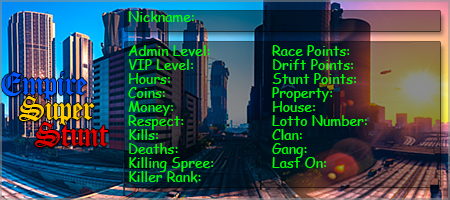
<style>
.page{position:relative;width:450px;height:200px}
.page>*{position:absolute;margin:0}
.t1{font:14px "ComicSansMS";color:#00ff00}
.t2{font:14px/14px "ComicSansMS";color:#00ff00}
.t3{font:32px "Diploma";color:#005aff}
.t4{font:32px "Diploma";color:#ffcc00}
.t5{font:32px "Diploma";color:#e40000}
</style>
<div class="page">
<p class="t1" style="left:128px;top:11px;width:66px;height:12px">Nickname:</p>
<p class="t2" style="left:128px;top:45px;width:239px;height:138px">Admin Level:  Race Points:<br>VIP Level:   Drift Points:<br>Hours:   Stunt Points:<br>Coins:   Property:<br>Money:   House:<br>Respect:   Lotto Number:<br>Kills:    Clan:<br>Deaths:   Gang:<br>Killing Spree:  Last On:<br>Killer Rank:<br>Stats Note:</p>
<p class="t3" style="left:1px;top:72px;width:86px;height:28px">Empire</p>
<p class="t4" style="left:19px;top:96px;width:76px;height:29px">Super</p>
<p class="t5" style="left:35px;top:122px;width:73px;height:25px">Stunt</p>
</div>
